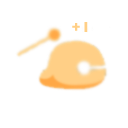
<style>
.page{position:relative;width:128px;height:128px;background:#ffffff}
.page>*{position:absolute;margin:0}
.t1{font:15px "Bauhaus93";color:#ffcf86}
</style>
<div class="page">
<p class="t1" style="left:72px;top:22px;width:16px;height:10px">+1</p>
</div>
